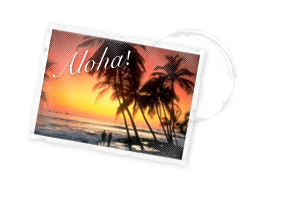
<style>
.page{position:relative;width:300px;height:200px;background:#ffffff}
.page>*{position:absolute;margin:0}
.t1{font:30px "SnellRoundhand";color:#ffffff}
.t2{font:30px "CaflischScriptPro-Regular";color:#ffffff}
</style>
<div class="page">
<p class="t1" style="left:52px;top:47px;width:79px;height:31px;rotate:-10deg">Aloha<span class="t2">!</span></p>
</div>
